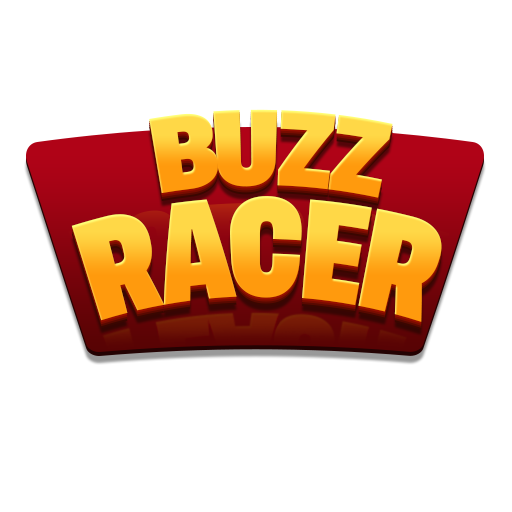
<style>
.page{position:relative;width:512px;height:512px;background:#ffffff}
.page>*{position:absolute;margin:0}
.t1{font:100px "AsketCondensed-ExtraBold";letter-spacing:-0.05em;text-transform:uppercase}
.t2{font:98.8px "AsketCondensed-ExtraBold";letter-spacing:-0.05em;text-transform:uppercase}
.t3{font:131.7px "AsketCondensed-ExtraBold";letter-spacing:-0.05em;text-transform:uppercase;scale:0.83 1}
</style>
<div class="page">
<p class="t1" style="left:149px;top:109px;width:244px;height:89px"><span class="t2">    </span>BUZZ</p>
<p class="t3" style="left:71px;top:196px;width:371px;height:126px">RACER</p>
</div>
